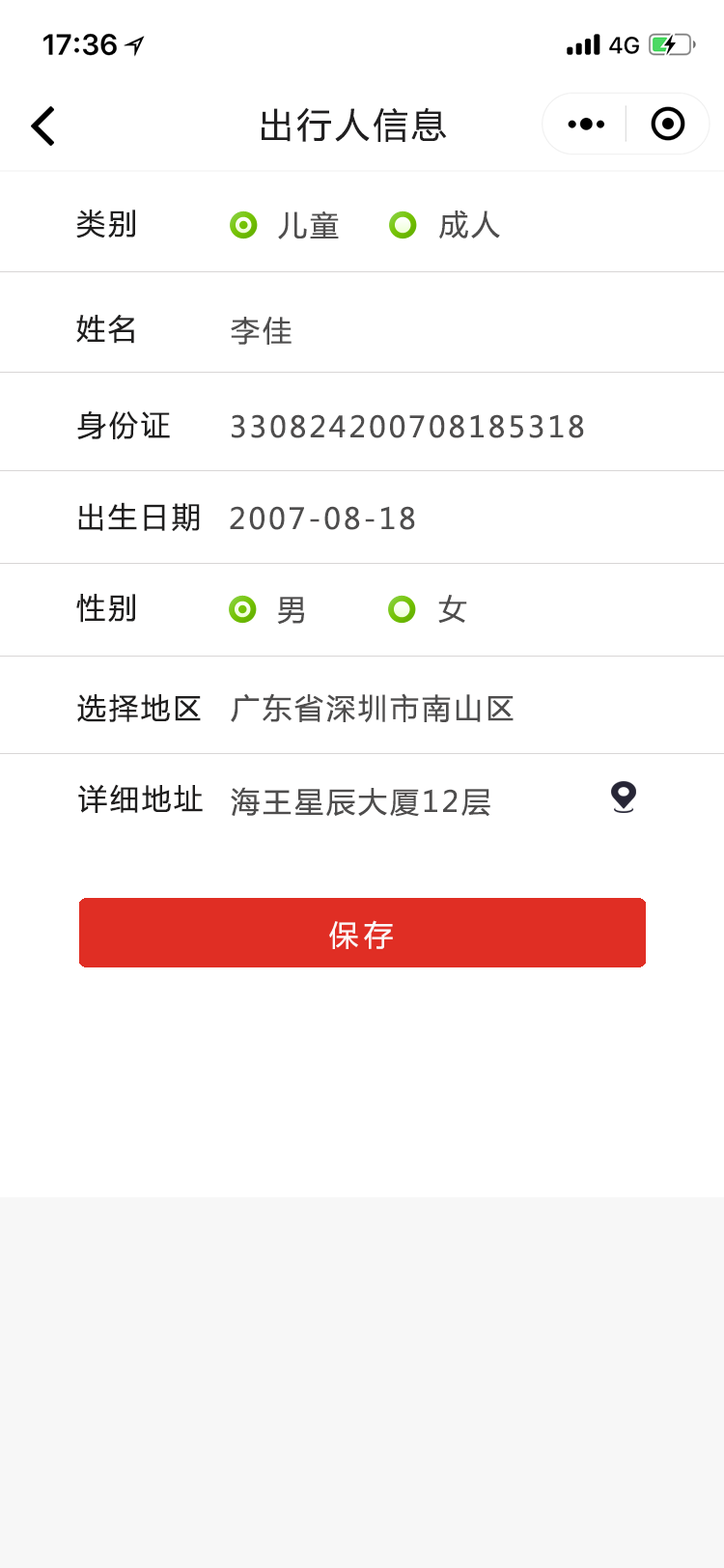
<style>
.page{position:relative;width:724px;height:1568px;background:#ffffff}
.page>*{position:absolute;margin:0}
.t1{font:34.8px "MicrosoftYaHei";letter-spacing:0.1em;color:#201f20}
.t2{font:29px "MicrosoftYaHei";letter-spacing:0.1em;color:#1f1e1e}
.t3{font:29px "MicrosoftYaHei";letter-spacing:0.1em;color:#4e4d4d}
.t4{font:29px "MicrosoftYaHei";letter-spacing:0.2em;color:#fcf8f8}
</style>
<div class="page">
<p class="t1" style="left:262px;top:107px;width:185px;height:35px">出行人信息</p>
<p class="t2" style="left:76px;top:210px;width:59px;height:28px">类别</p>
<p class="t3" style="left:278px;top:210px;width:61px;height:29px">儿童</p>
<p class="t3" style="left:439px;top:210px;width:61px;height:29px">成人</p>
<p class="t2" style="left:76px;top:315px;width:58px;height:29px">姓名</p>
<p class="t3" style="left:231px;top:316px;width:61px;height:29px">李佳</p>
<p class="t2" style="left:77px;top:410px;width:93px;height:29px">身份证</p>
<p class="t3" style="left:232px;top:414px;width:352px;height:24px">330824200708185318</p>
<p class="t2" style="left:78px;top:502px;width:122px;height:30px">出生日期</p>
<p class="t3" style="left:230px;top:506px;width:185px;height:24px">2007-08-18</p>
<p class="t2" style="left:76px;top:594px;width:59px;height:29px">性别</p>
<p class="t3" style="left:277px;top:597px;width:27px;height:28px">男</p>
<p class="t3" style="left:438px;top:595px;width:29px;height:28px">女</p>
<p class="t2" style="left:77px;top:694px;width:124px;height:28px">选择地区</p>
<p class="t3" style="left:231px;top:693px;width:283px;height:30px">广东省深圳市南山区</p>
<p class="t2" style="left:78px;top:784px;width:125px;height:29px">详细地址</p>
<p class="t3" style="left:231px;top:787px;width:259px;height:30px">海王星辰大厦12层</p>
<p class="t4" style="left:329px;top:920px;width:64px;height:29px">保存</p>
</div>
